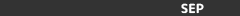
<style>
.page{position:relative;width:240px;height:16px;background:#333333}
.page>*{position:absolute;margin:0}
.t1{font:12.5px "RoundedMplus1c-ExtraBold";color:#ffffff}
</style>
<div class="page">
<p class="t1" style="left:181px;top:3px;width:23px;height:11px">SEP</p>
</div>
